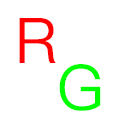
<style>
.page{position:relative;width:120px;height:120px;background:#ffffff}
.page>*{position:absolute;margin:0}
.t1{font:63.2px "PingFangSC-Regular";color:#ff0000}
.t2{font:63.2px "PingFangSC-Regular";color:#00ff00}
</style>
<div class="page">
<p class="t1" style="left:19px;top:18px;width:37px;height:45px">R</p>
<p class="t2" style="left:59px;top:64px;width:42px;height:47px">Ｇ</p>
</div>
